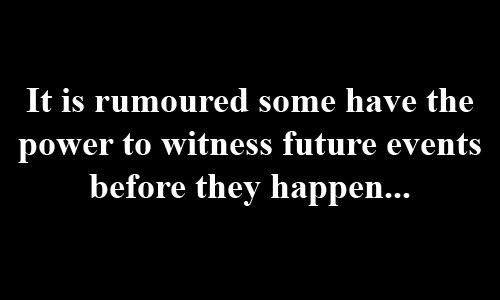
<style>
.page{position:relative;width:500px;height:300px;background:#000000}
.page>*{position:absolute;margin:0}
.t1{font:36px "TimesNewRomanPS-BoldMT";color:#ffffff}
</style>
<div class="page">
<p class="t1" style="left:18px;top:88px;width:463px;height:118px;text-align:center">It is rumoured some have the power to witness future events before they happen...</p>
</div>
